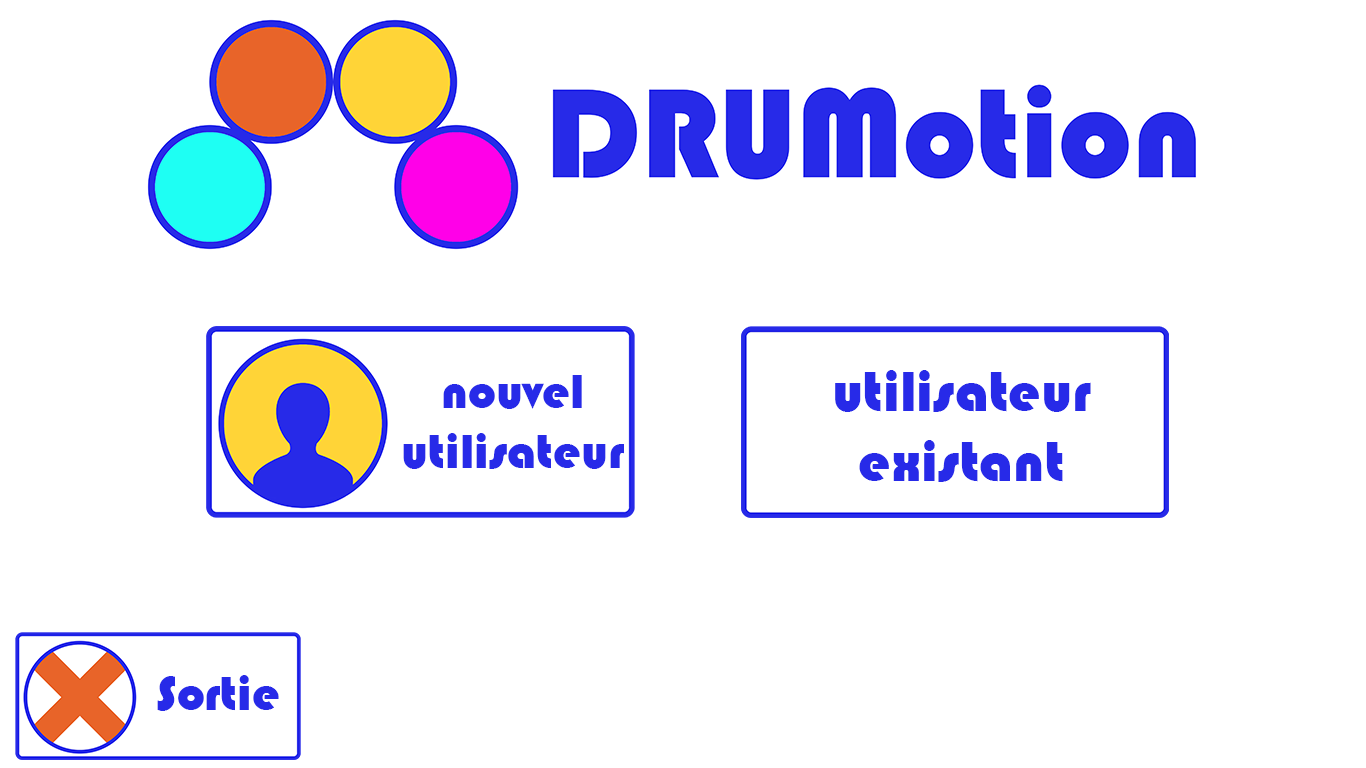
<style>
.page{position:relative;width:1366px;height:768px;background:#ffffff}
.page>*{position:absolute;margin:0}
.t1{font:50px "Bauhaus93";color:#272ae8}
.t2{font:58.3px "Bauhaus93";color:#272ae8}
</style>
<div class="page">
<p class="t1" style="left:403px;top:375px;width:221px;height:94px;text-align:center">nouvel utilisateur</p>
<p class="t2" style="left:835px;top:370px;width:256px;height:112px;text-align:center">utilisateur existant</p>
<p class="t1" style="left:157px;top:675px;width:122px;height:36px">Sortie</p>
</div>
